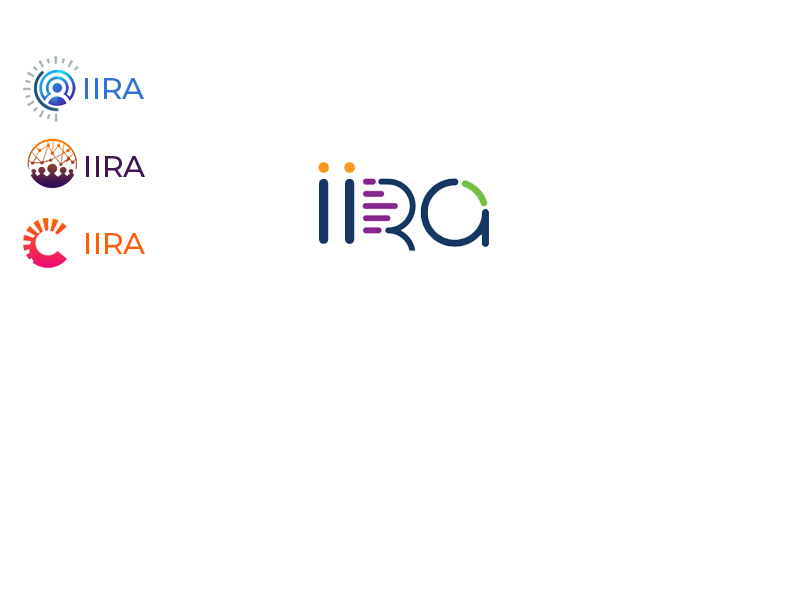
<style>
.page{position:relative;width:800px;height:600px;background:#ffffff}
.page>*{position:absolute;margin:0}
.t1{font:30px "Montserrat-Medium";color:#fe5e06}
</style>
<div class="page">
<p class="t1" style="left:86px;top:233px;width:59px;height:21px">IIRA</p>
</div>
